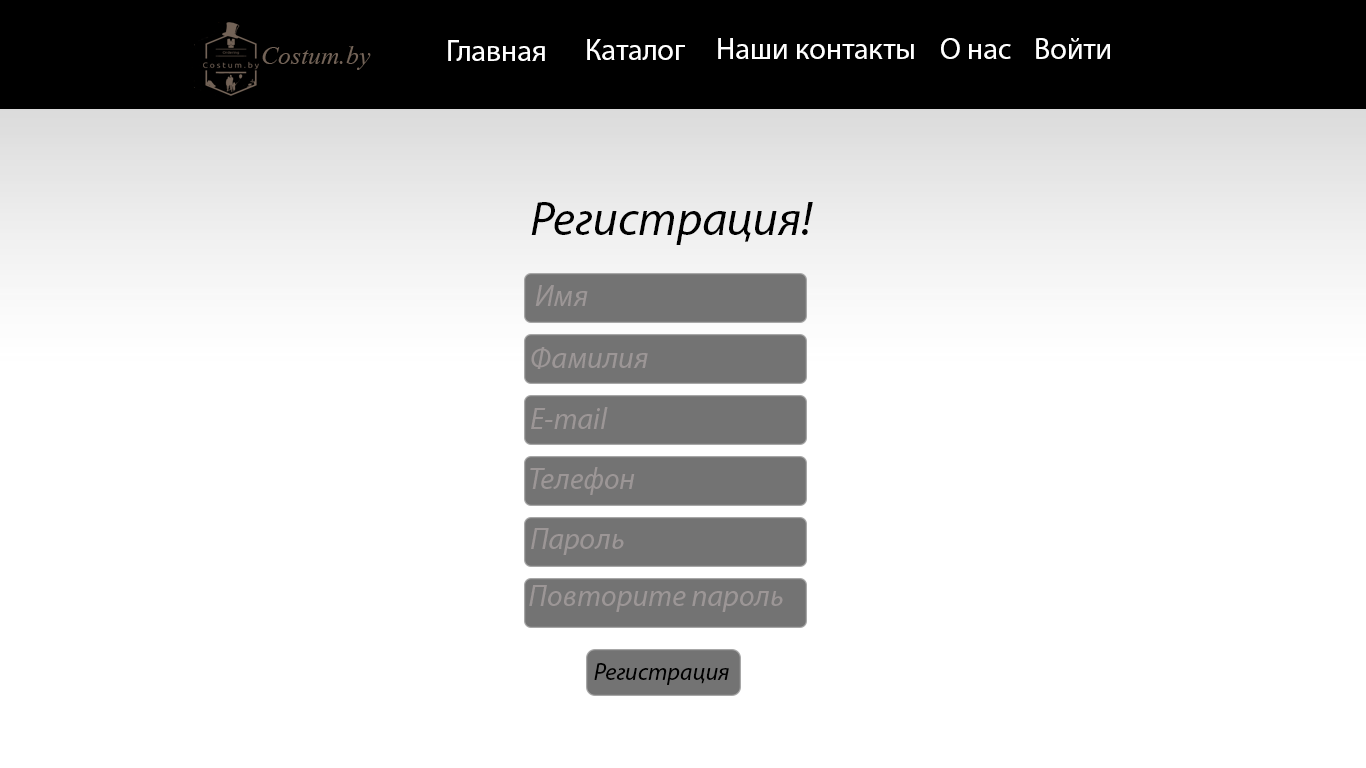
<style>
.page{position:relative;width:1366px;height:768px;background:#ffffff}
.page>*{position:absolute;margin:0}
.t1{font:30px "MyriadPro-Regular";color:#ffffff}
.t2{font:48px "MyriadPro-It";color:#000000}
.t3{font:30px "MyriadPro-It";color:#9c9696}
.t4{font:24px "MyriadPro-It";color:#000000}
</style>
<div class="page">
<p class="t1" style="left:448px;top:40px;width:97px;height:21px">Главная</p>
<p class="t1" style="left:587px;top:39px;width:98px;height:21px">Каталог</p>
<p class="t1" style="left:718px;top:38px;width:196px;height:21px">Наши контакты</p>
<p class="t1" style="left:941px;top:38px;width:70px;height:21px">О нас</p>
<p class="t1" style="left:1036px;top:38px;width:74px;height:21px">Войти</p>
<p class="t2" style="left:531px;top:202px;width:282px;height:43px">Регистрация!</p>
<p class="t3" style="left:535px;top:285px;width:53px;height:21px">Имя</p>
<p class="t3" style="left:531px;top:347px;width:117px;height:22px">Фамилия</p>
<p class="t3" style="left:531px;top:407px;width:77px;height:22px">E-mail</p>
<p class="t3" style="left:530px;top:467px;width:105px;height:28px">Телефон</p>
<p class="t3" style="left:531px;top:528px;width:93px;height:27px">Пароль</p>
<p class="t3" style="left:529px;top:585px;width:254px;height:27px">Повторите пароль</p>
<p class="t4" style="left:594px;top:663px;width:135px;height:22px">Регистрация</p>
</div>
